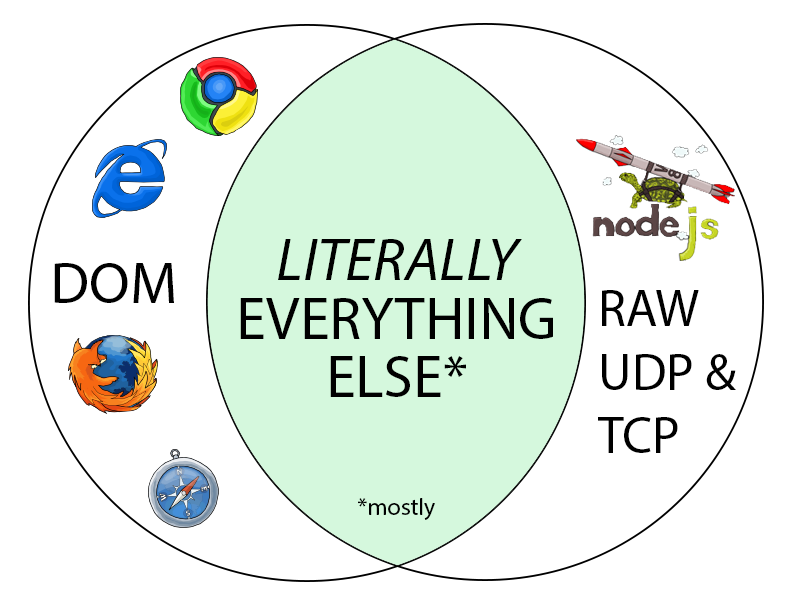
<style>
.page{position:relative;width:800px;height:600px;background:#ffffff}
.page>*{position:absolute;margin:0}
.t1{font:60px/58.9px "MyriadPro-Regular";color:#000000}
.t2{font:60px/58.9px "MyriadPro-It";color:#000000}
.t3{font:24px/58.9px "MyriadPro-Regular";color:#000000}
.t4{font:59px "MyriadPro-Regular";color:#000000}
.t5{font:51.8px/31.6px "MyriadPro-Regular";color:#000000}
</style>
<div class="page">
<p class="t1" style="left:240px;top:239px;width:313px;height:281px;text-align:center"><span class="t2">LITERALLY<br></span>EVERYTHING<br>ELSE*<br><br><span class="t3">*mostly</span></p>
<p class="t4" style="left:54px;top:263px;width:120px;height:40px">DOM</p>
<p class="t5" style="left:598px;top:290px;width:138px;height:163px">RAW<br><br>UDP &amp;<br><br>TCP</p>
</div>
